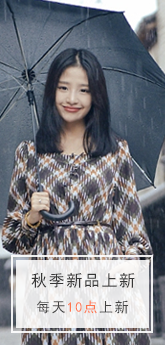
<style>
.page{position:relative;width:165px;height:345px}
.page>*{position:absolute;margin:0}
.t1{font:16px "SimHei";letter-spacing:0.1em;color:#373737}
.t2{font:14px "SimHei";letter-spacing:0.1em;color:#ff754d}
.t3{font:14px "SimHei";letter-spacing:0.1em;color:#444444}
</style>
<div class="page">
<p class="t1" style="left:31px;top:272px;width:104px;height:16px">秋季新品上新</p>
<p class="t2" style="left:37px;top:300px;width:91px;height:14px"><span class="t3">每天</span>10点<span class="t3">上新</span></p>
</div>
